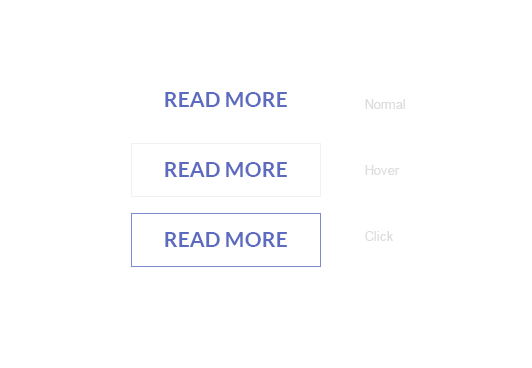
<style>
.page{position:relative;width:532px;height:368px;background:#ffffff}
.page>*{position:absolute;margin:0}
.t1{font:21px "Lato-Bold";color:#5c6bc0;text-transform:uppercase}
.t2{font:13px/66px "ArialMT";color:#dddddd}
</style>
<div class="page">
<p class="t1" style="left:165px;top:92px;width:122px;height:15px">Read More</p>
<p class="t2" style="left:365px;top:99px;width:40px;height:142px">Normal<br>Hover<br>Click</p>
<p class="t1" style="left:165px;top:162px;width:122px;height:15px">Read More</p>
<p class="t1" style="left:165px;top:232px;width:122px;height:15px">Read More</p>
</div>
